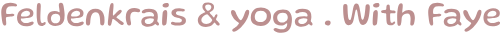
<style>
.page{position:relative;width:500px;height:33px;background:#ffffff}
.page>*{position:absolute;margin:0}
.t1{font:34.8px "Gluten-Regular";color:#bc8f8f;scale:0.96 1}
</style>
<div class="page">
<p class="t1" style="left:1px;top:2px;width:500px;height:31px">Feldenkrais &amp; yoga . With Faye</p>
</div>
